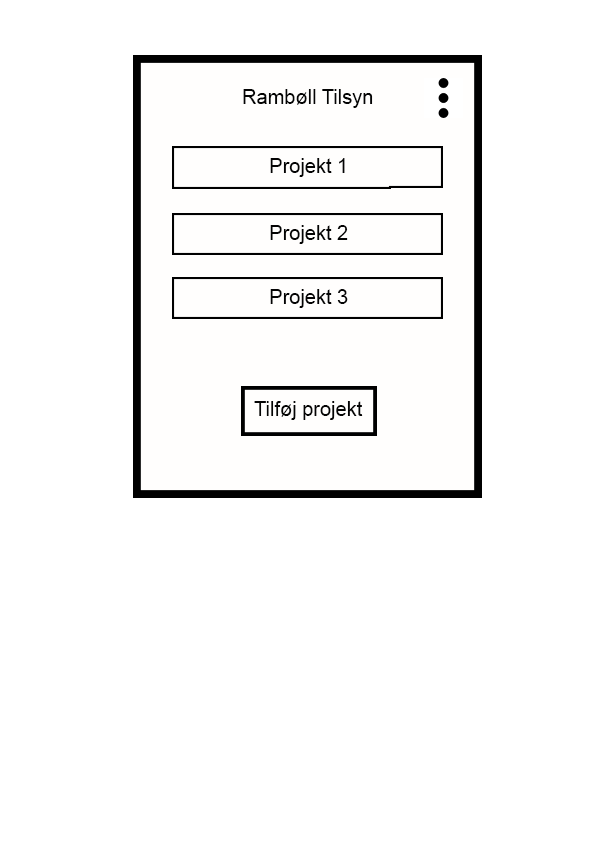
<style>
.page{position:relative;width:595px;height:842px;background:#ffffff}
.page>*{position:absolute;margin:0}
.t1{font:20px "ArialMT";color:#040404}
</style>
<div class="page">
<p class="t1" style="left:243px;top:89px;width:130px;height:19px">Rambøll Tilsyn</p>
<p class="t1" style="left:270px;top:158px;width:75px;height:19px">Projekt 1</p>
<p class="t1" style="left:270px;top:225px;width:78px;height:19px">Projekt 2</p>
<p class="t1" style="left:270px;top:289px;width:78px;height:19px">Projekt 3</p>
<p class="t1" style="left:254px;top:401px;width:109px;height:19px">Tilføj projekt</p>
</div>
